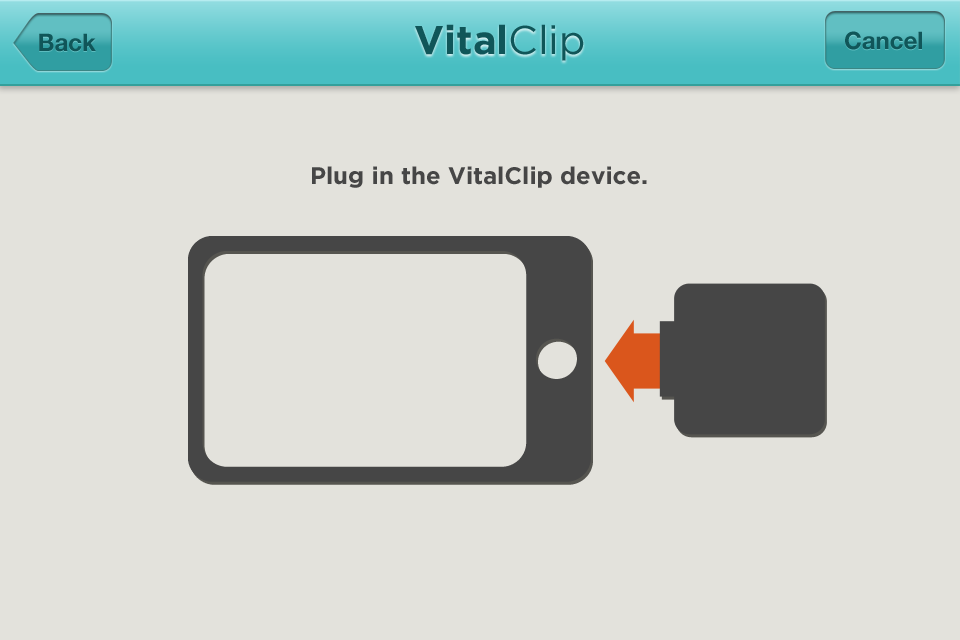
<style>
.page{position:relative;width:960px;height:640px;background:#e3e2dc}
.page>*{position:absolute;margin:0}
.t1{font:40px "Gotham-Bold";color:#105659}
.t2{font:40px "Gotham-Book";color:#105659}
.t3{font:24px "HelveticaNeue-Bold";color:#105659}
.t4{font:24px "Gotham-Bold";color:#464646}
</style>
<div class="page">
<p class="t1" style="left:415px;top:24px;width:169px;height:37px">Vital<span class="t2">Clip</span></p>
<p class="t3" style="left:39px;top:33px;width:57px;height:19px">Back</p>
<p class="t3" style="left:845px;top:31px;width:77px;height:19px">Cancel</p>
<p class="t4" style="left:312px;top:166px;width:335px;height:22px">Plug in the VitalClip device.</p>
</div>
